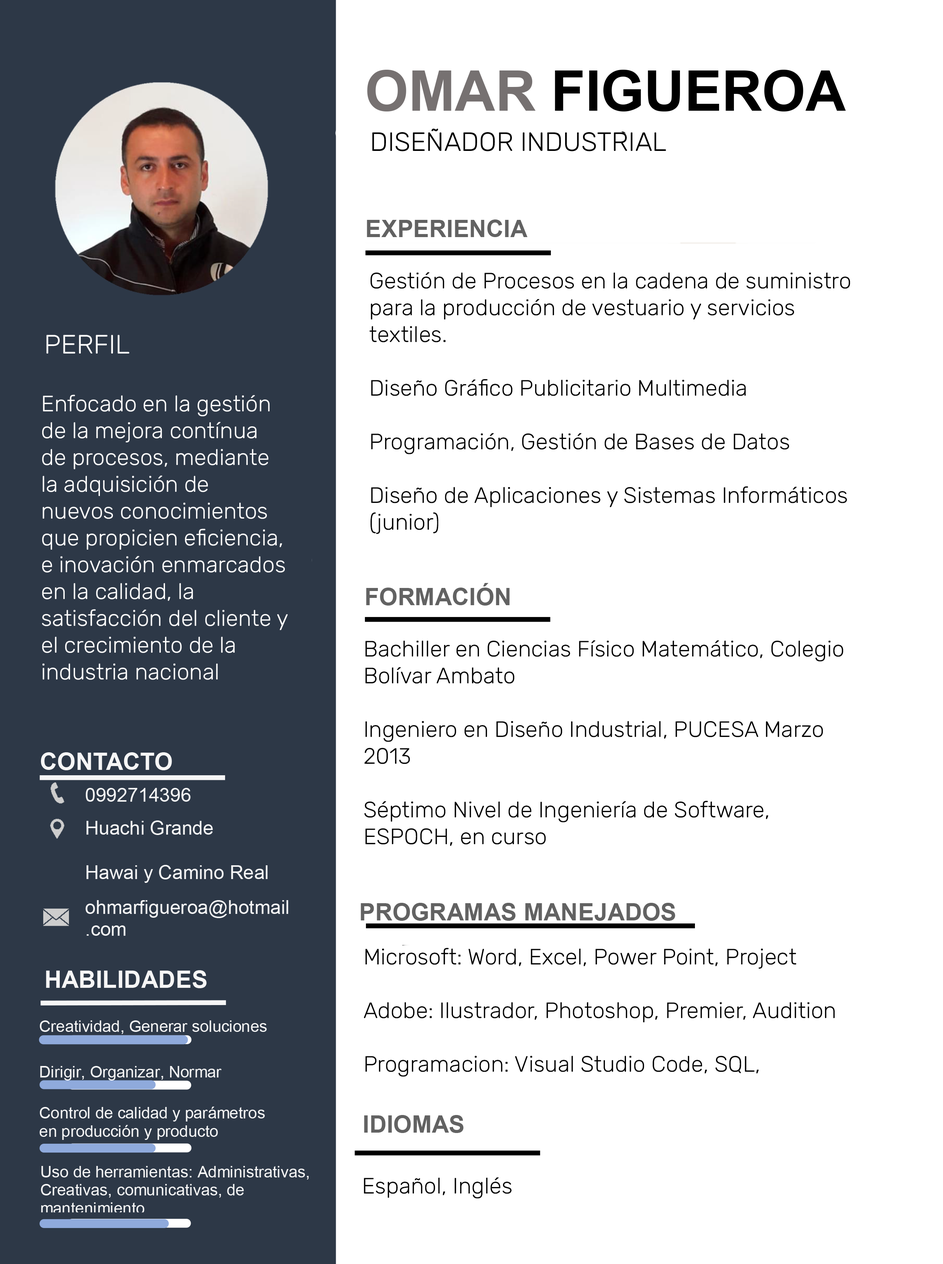
<style>
.page{position:relative;width:943px;height:1264px;background:#ffffff}
.page>*{position:absolute;margin:0}
.t1{font:22.3px "Rubik-Light";color:#000000}
.t2{font:25.5px "Rubik-Light";color:#000000}
.t3{font:26.6px "Rubik-Light";color:#ffffff}
.t4{font:22.3px "Rubik-Light";color:#ffffff}
</style>
<div class="page">
<p class="t1" style="left:370px;top:272px;width:481px;height:262px">Gestión de Procesos en la cadena de suministro para la producción de vestuario y servicios textiles.<br><br>Diseño Gráfico Publicitario Multimedia<br><br>Programación, Gestión de Bases de Datos<br><br>Diseño de Aplicaciones y Sistemas Informáticos (junior)<br><span class="t2"><br>Ofimática,</span></p>
<p class="t3" style="left:46px;top:335px;width:83px;height:19px">PERFIL</p>
<p class="t4" style="left:42px;top:395px;width:246px;height:285px">Enfocado en la gestión de la mejora contínua de procesos, mediante la adquisición de nuevos conocimientos que propicien eficiencia, e inovación enmarcados en la calidad, la satisfacción del cliente y el crecimiento de la industria nacional</p>
<p class="t1" style="left:364px;top:640px;width:480px;height:206px">Bachiller en Ciencias Físico Matemático, Colegio Bolívar Ambato<br><br>Ingeniero en Diseño Industrial, PUCESA Marzo 2013<br><br>Séptimo Nivel de Ingeniería de Software, ESPOCH, en curso</p>
<p class="t1" style="left:364px;top:948px;width:471px;height:129px">Microsoft: Word, Excel, Power Point, Project<br><br>Adobe: Ilustrador, Photoshop, Premier, Audition<br><br>Programacion: Visual Studio Code, SQL,</p>
<p class="t1" style="left:364px;top:1177px;width:148px;height:21px">Español, Inglés</p>
</div>
